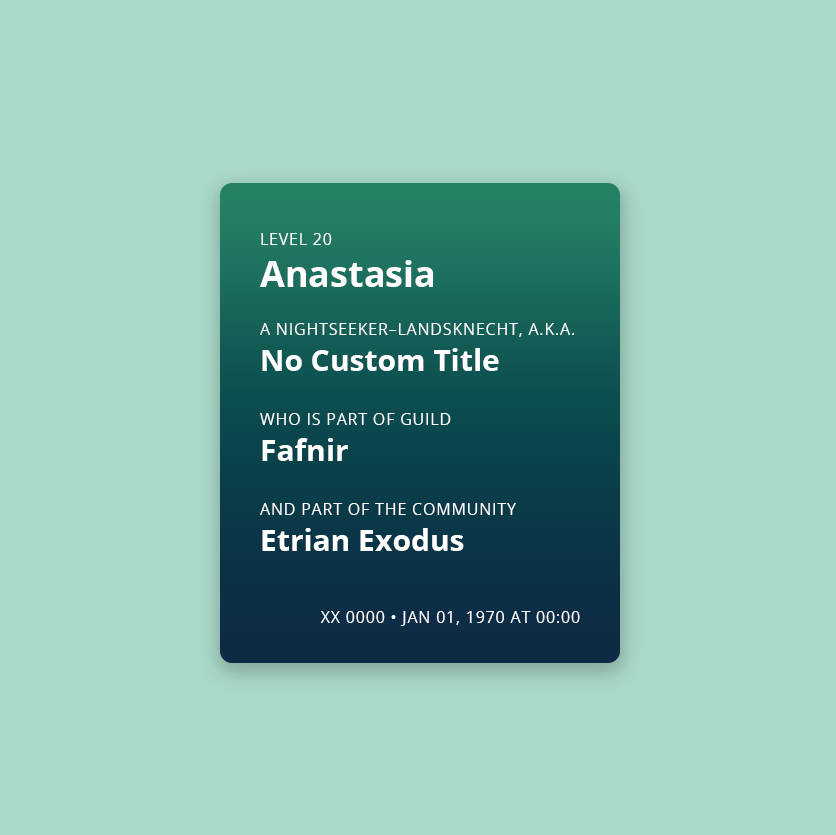
<style>
.page{position:relative;width:836px;height:835px;background:#a9d9ca}
.page>*{position:absolute;margin:0}
.t1{font:16px "OpenSans";letter-spacing:0.05em;color:#ffffff;text-transform:uppercase}
.t2{font:36px "OpenSans-Bold";color:#ffffff}
.t3{font:30px "OpenSans-Bold";color:#ffffff}
</style>
<div class="page">
<p class="t1" style="left:261px;top:233px;width:71px;height:12px">Level 20</p>
<p class="t2" style="left:260px;top:260px;width:173px;height:27px">Anastasia</p>
<p class="t1" style="left:260px;top:323px;width:314px;height:14px">A nightseeker–landsknecht, a.k.a.</p>
<p class="t3" style="left:262px;top:348px;width:237px;height:23px">No Custom Title</p>
<p class="t1" style="left:260px;top:413px;width:191px;height:12px">who is part of guild</p>
<p class="t3" style="left:262px;top:438px;width:86px;height:23px">Fafnir</p>
<p class="t1" style="left:260px;top:503px;width:256px;height:12px">and part of the community</p>
<p class="t3" style="left:262px;top:528px;width:202px;height:23px">Etrian Exodus</p>
<p class="t1" style="left:320px;top:611px;width:260px;height:15px">XX 0000 • Jan 01, 1970 at 00:00</p>
</div>
